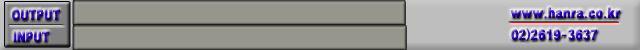
<style>
.page{position:relative;width:640px;height:50px;background:#96968c}
.page>*{position:absolute;margin:0}
.t1{font:14px "GothicXB-HM"}
</style>
<div class="page">
<p class="t1" style="left:12px;top:9px;width:48px;height:11px">OUTPUT</p>
<p class="t1" style="left:510px;top:7px;width:111px;height:12px">www.hanra.co.kr</p>
<p class="t1" style="left:511px;top:28px;width:87px;height:13px">02)2619-3637</p>
<p class="t1" style="left:13px;top:31px;width:37px;height:11px">INPUT</p>
</div>
